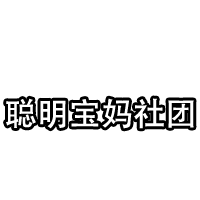
<style>
.page{position:relative;width:200px;height:200px;background:#ffffff}
.page>*{position:absolute;margin:0}
.t1{font:32px "STHeitiSC-Medium";color:#000000}
</style>
<div class="page">
<p class="t1" style="left:6px;top:98px;width:188px;height:31px">聪明宝妈社团</p>
</div>
